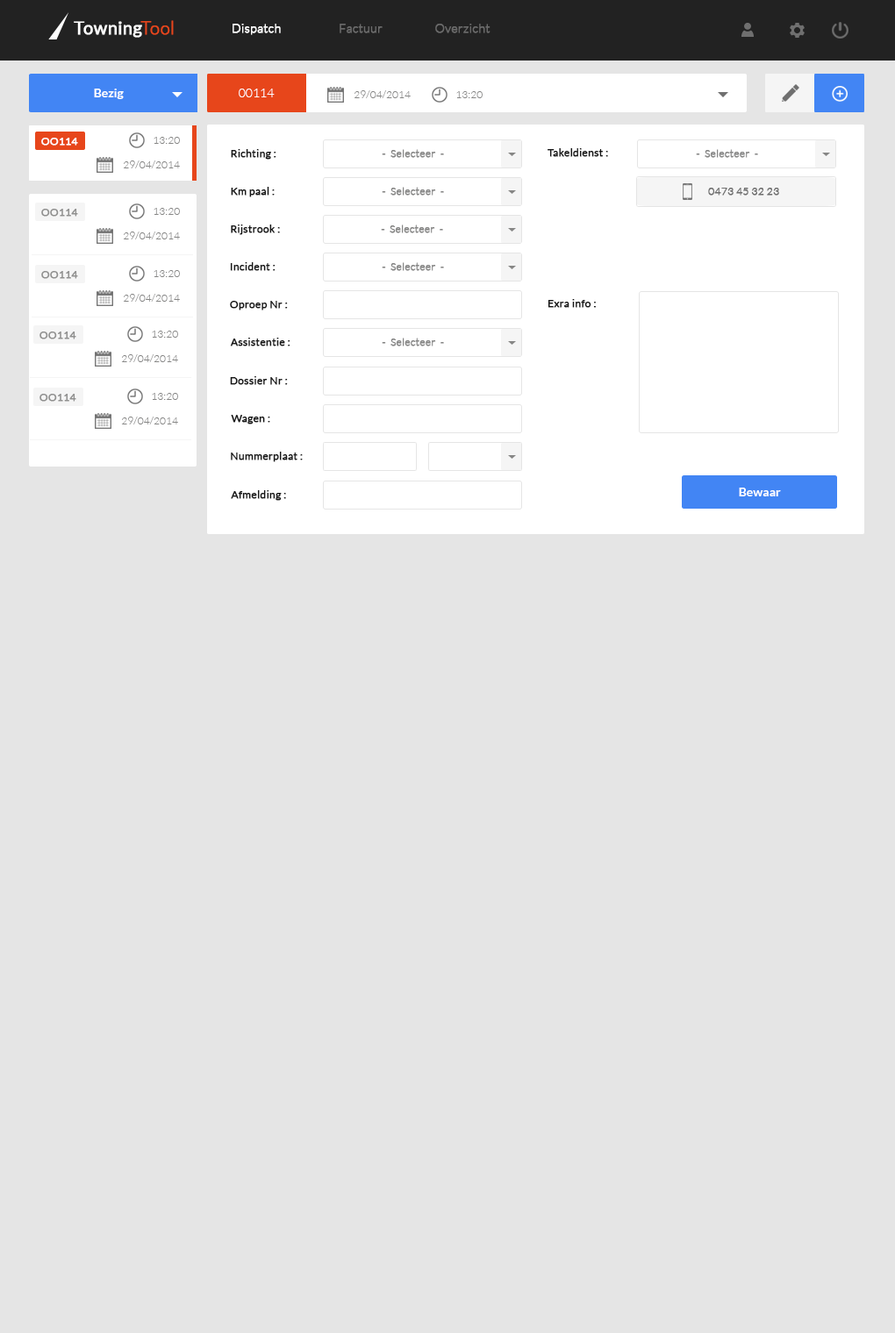
<style>
.page{position:relative;width:895px;height:1333px;background:#e5e5e5}
.page>*{position:absolute;margin:0}
.t1{font:18.1px "Lato-Regular";letter-spacing:0.005em;color:#ffffff;font-weight:bold}
.t2{font:18.1px "Lato-Light";letter-spacing:0.005em;color:#e7461b;font-weight:bold}
.t3{font:12.3px "Lato-Light";letter-spacing:0.005em;color:#ffffff;font-weight:bold}
.t4{font:12.3px "Lato-Light";letter-spacing:0.005em;color:#6b6b6b;font-weight:bold}
.t5{font:12.3px "Lato-Bold";color:#ffffff}
.t6{font:12.3px "Lato-Light";color:#ffffff}
.t7{font:10.5px "Lato-Light";letter-spacing:0.005em;color:#868685}
.t8{font:10.5px "Lato-Regular";letter-spacing:0.005em;color:#ffffff;font-weight:bold}
.t9{font:10.5px "Lato-Regular";letter-spacing:0.005em;color:#171717;font-weight:bold}
.t10{font:10.5px "Lato-Light";letter-spacing:0.005em;color:#868685;font-weight:bold}
.t11{font:10.5px "Lato-Light";letter-spacing:0.005em;color:#6f6f6f;font-weight:bold}
.t12{font:10.5px "Lato-Regular";letter-spacing:0.005em;color:#90908f;font-weight:bold}
</style>
<div class="page">
<p class="t1" style="left:74px;top:20px;width:100px;height:18px">Towning<span class="t2">Tool</span></p>
<p class="t3" style="left:232px;top:24px;width:49px;height:11px">Dispatch</p>
<p class="t4" style="left:339px;top:24px;width:43px;height:9px">Factuur</p>
<p class="t4" style="left:435px;top:24px;width:55px;height:9px">Overzicht</p>
<p class="t5" style="left:94px;top:89px;width:30px;height:10px">Bezig</p>
<p class="t6" style="left:239px;top:89px;width:35px;height:8px">00114</p>
<p class="t7" style="left:353px;top:90px;width:57px;height:8px">29/04/2014</p>
<p class="t7" style="left:456px;top:91px;width:26px;height:7px">13:20</p>
<p class="t8" style="left:41px;top:138px;width:37px;height:8px">OO114</p>
<p class="t7" style="left:153px;top:137px;width:27px;height:7px">13:20</p>
<p class="t9" style="left:231px;top:149px;width:45px;height:11px">Richting :</p>
<p class="t10" style="left:381px;top:149px;width:63px;height:9px">-  Selecteer  -</p>
<p class="t9" style="left:547px;top:148px;width:61px;height:9px">Takeldienst :</p>
<p class="t10" style="left:695px;top:149px;width:63px;height:9px">-  Selecteer  -</p>
<p class="t7" style="left:123px;top:160px;width:57px;height:8px">29/04/2014</p>
<p class="t9" style="left:231px;top:187px;width:43px;height:10px">Km paal :</p>
<p class="t10" style="left:381px;top:187px;width:63px;height:9px">-  Selecteer  -</p>
<p class="t11" style="left:708px;top:188px;width:71px;height:8px">0473 45 32 23</p>
<p class="t12" style="left:41px;top:209px;width:37px;height:8px">OO114</p>
<p class="t7" style="left:153px;top:208px;width:27px;height:7px">13:20</p>
<p class="t7" style="left:123px;top:232px;width:57px;height:7px">29/04/2014</p>
<p class="t9" style="left:231px;top:225px;width:49px;height:10px">Rijstrook :</p>
<p class="t10" style="left:381px;top:225px;width:62px;height:8px">-  Selecteer  -</p>
<p class="t9" style="left:230px;top:262px;width:45px;height:9px">Incident :</p>
<p class="t10" style="left:381px;top:262px;width:63px;height:9px">-  Selecteer  -</p>
<p class="t12" style="left:41px;top:271px;width:37px;height:8px">OO114</p>
<p class="t7" style="left:153px;top:270px;width:27px;height:7px">13:20</p>
<p class="t7" style="left:123px;top:294px;width:57px;height:8px">29/04/2014</p>
<p class="t9" style="left:230px;top:301px;width:58px;height:9px">Oproep Nr :</p>
<p class="t9" style="left:547px;top:299px;width:48px;height:9px">Exra info :</p>
<p class="t12" style="left:39px;top:332px;width:37px;height:7px">OO114</p>
<p class="t7" style="left:152px;top:331px;width:26px;height:7px">13:20</p>
<p class="t9" style="left:230px;top:338px;width:60px;height:8px">Assistentie :</p>
<p class="t10" style="left:381px;top:338px;width:63px;height:8px">-  Selecteer  -</p>
<p class="t7" style="left:121px;top:354px;width:57px;height:8px">29/04/2014</p>
<p class="t9" style="left:230px;top:376px;width:58px;height:9px">Dossier Nr :</p>
<p class="t12" style="left:39px;top:394px;width:37px;height:8px">OO114</p>
<p class="t7" style="left:152px;top:393px;width:26px;height:7px">13:20</p>
<p class="t7" style="left:121px;top:417px;width:57px;height:7px">29/04/2014</p>
<p class="t9" style="left:231px;top:415px;width:39px;height:9px">Wagen :</p>
<p class="t9" style="left:231px;top:452px;width:72px;height:10px">Nummerplaat :</p>
<p class="t9" style="left:231px;top:490px;width:55px;height:11px">Afmelding :</p>
<p class="t5" style="left:738px;top:488px;width:43px;height:8px">Bewaar</p>
</div>
